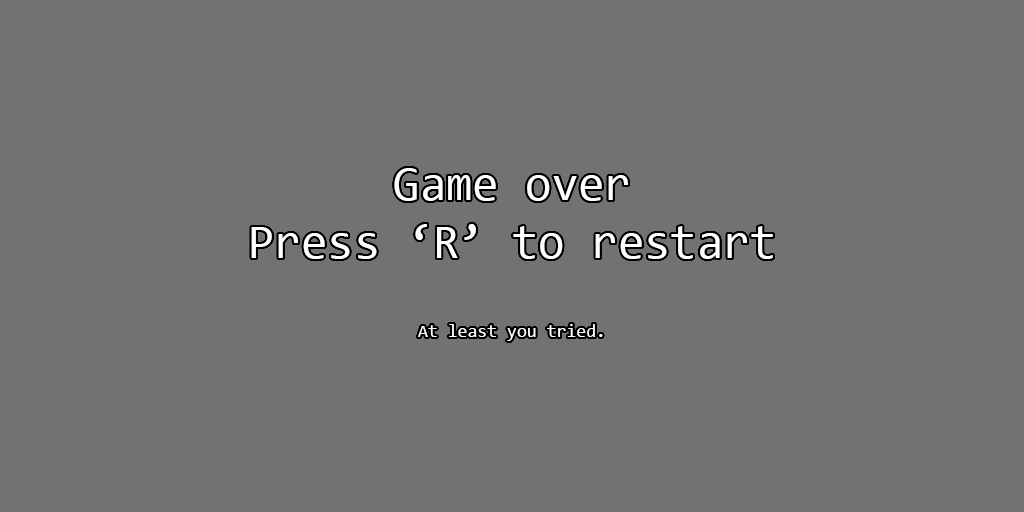
<style>
.page{position:relative;width:1024px;height:512px;background:#727272}
.page>*{position:absolute;margin:0}
.t1{font:48px "Consolas";color:#ffffff}
.t2{font:18px "Consolas";color:#ffffff}
</style>
<div class="page">
<p class="t1" style="left:251px;top:168px;width:522px;height:173px;text-align:center">Game over<br>Press ‘R’ to restart<br><br><span class="t2">At least you tried.</span></p>
</div>
